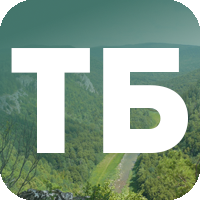
<style>
.page{position:relative;width:200px;height:200px;background:#ffffff}
.page>*{position:absolute;margin:0}
.t1{font:150px "IntroDemo-BlackCAPS";color:#ffffff}
</style>
<div class="page">
<p class="t1" style="left:11px;top:48px;width:177px;height:105px">ТБ</p>
</div>
